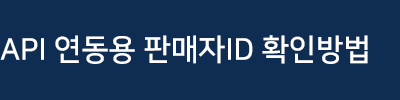
<style>
.page{position:relative;width:400px;height:100px;background:#0f2d53}
.page>*{position:absolute;margin:0}
.t1{font:30px "NanumSquareB";color:#ffffff}
</style>
<div class="page">
<p class="t1" style="left:0px;top:35px;width:368px;height:29px">API 연동용 판매자ID 확인방법</p>
</div>
